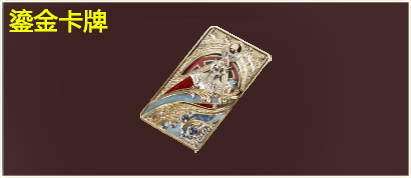
<style>
.page{position:relative;width:411px;height:178px}
.page>*{position:absolute;margin:0}
.t1{font:24px "MicrosoftYaHeiUI";color:#f4ff00;font-weight:bold}
</style>
<div class="page">
<p class="t1" style="left:9px;top:9px;width:99px;height:24px">鎏金卡牌</p>
</div>
